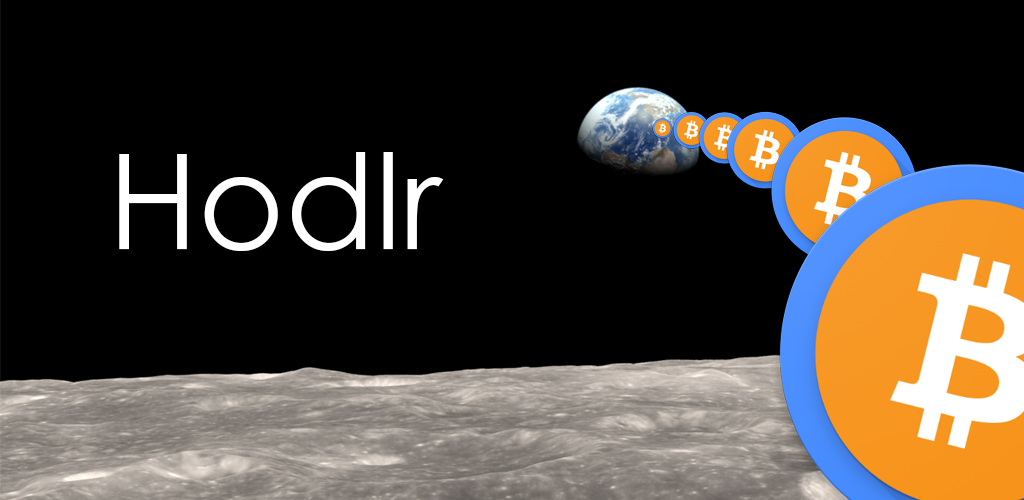
<style>
.page{position:relative;width:1024px;height:500px;background:#000000}
.page>*{position:absolute;margin:0}
.t1{font:132px "CenturyGothic";color:#ffffff}
</style>
<div class="page">
<p class="t1" style="left:119px;top:152px;width:325px;height:99px">Hodlr</p>
</div>
